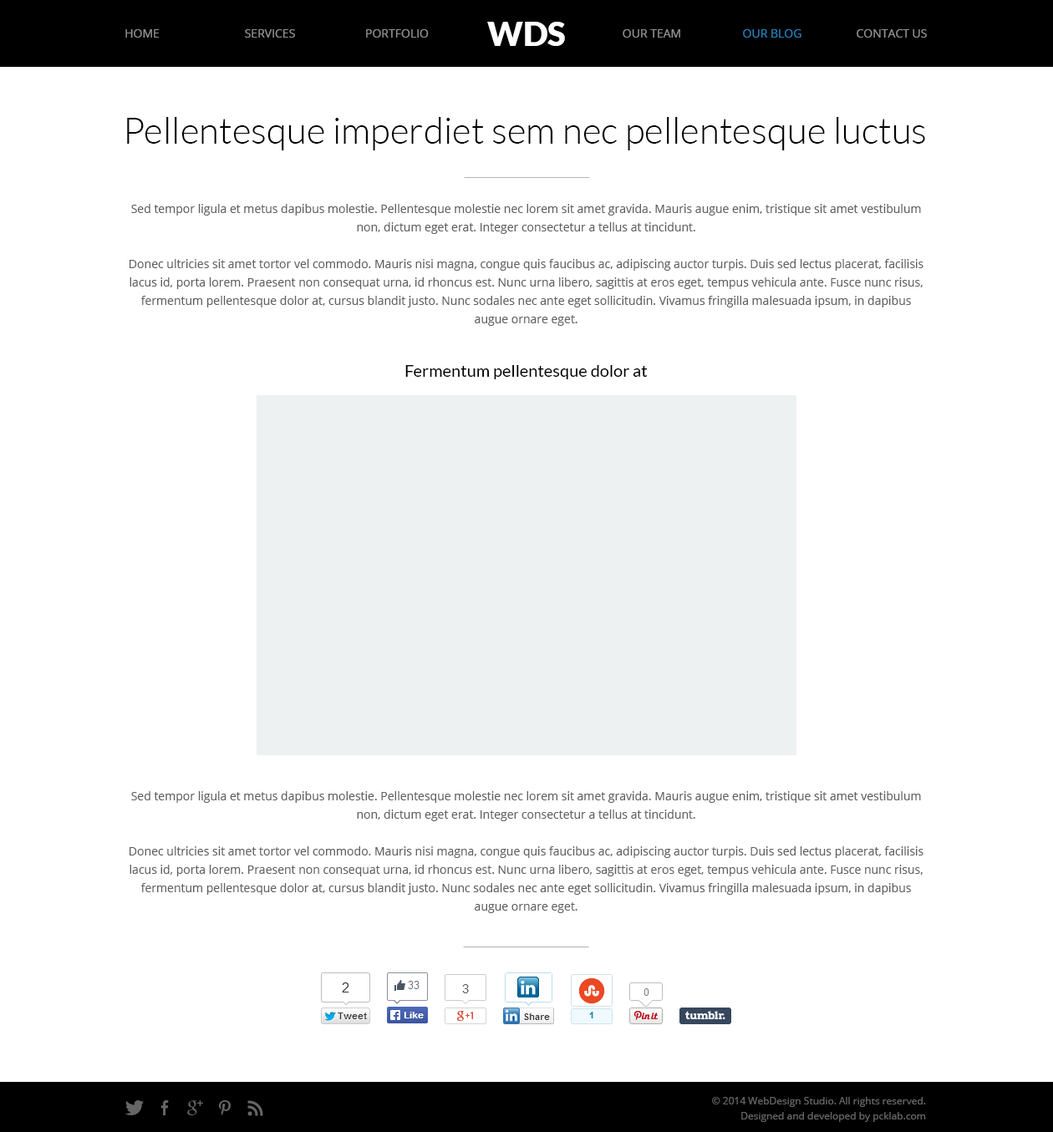
<style>
.page{position:relative;width:1053px;height:1132px;background:#ffffff}
.page>*{position:absolute;margin:0}
.t1{font:11.7px "OpenSans";color:#909090;text-transform:uppercase}
.t2{font:33.4px "Lato-Black";color:#ffffff;text-transform:uppercase}
.t3{font:11.7px "OpenSans";color:#2980b9;text-transform:uppercase}
.t4{font:36.8px "Lato-Light";color:#000000}
.t5{font:11.7px/18.4px "OpenSans";color:#606060}
.t6{font:16.7px "Lato-Regular";color:#000000}
.t7{font:10px/15px "OpenSans";color:#666666}
</style>
<div class="page">
<p class="t1" style="left:125px;top:29px;width:35px;height:9px">home</p>
<p class="t1" style="left:245px;top:29px;width:50px;height:9px">services</p>
<p class="t1" style="left:366px;top:29px;width:63px;height:9px">Portfolio</p>
<p class="t2" style="left:487px;top:22px;width:78px;height:24px">WDs</p>
<p class="t1" style="left:623px;top:29px;width:57px;height:9px">our team</p>
<p class="t3" style="left:743px;top:29px;width:58px;height:9px">our blog</p>
<p class="t1" style="left:857px;top:29px;width:70px;height:9px">Contact us</p>
<p class="t4" style="left:127px;top:117px;width:798px;height:33px">Pellentesque imperdiet sem nec pellentesque luctus</p>
<p class="t5" style="left:130px;top:204px;width:793px;height:122px;text-align:center">Sed tempor ligula et metus dapibus molestie. Pellentesque molestie nec lorem sit amet gravida. Mauris augue enim, tristique sit amet vestibulum non, dictum eget erat. Integer consectetur a tellus at tincidunt.<br><br>Donec ultricies sit amet tortor vel commodo. Mauris nisi magna, congue quis faucibus ac, adipiscing auctor turpis. Duis sed lectus placerat, facilisis lacus id, porta lorem. Praesent non consequat urna, id rhoncus est. Nunc urna libero, sagittis at eros eget, tempus vehicula ante. Fusce nunc risus, fermentum pellentesque dolor at, cursus blandit justo. Nunc sodales nec ante eget sollicitudin. Vivamus fringilla malesuada ipsum, in dapibus augue ornare eget.</p>
<p class="t6" style="left:405px;top:365px;width:243px;height:14px">Fermentum pellentesque dolor at</p>
<p class="t5" style="left:130px;top:791px;width:793px;height:122px;text-align:center">Sed tempor ligula et metus dapibus molestie. Pellentesque molestie nec lorem sit amet gravida. Mauris augue enim, tristique sit amet vestibulum non, dictum eget erat. Integer consectetur a tellus at tincidunt.<br><br>Donec ultricies sit amet tortor vel commodo. Mauris nisi magna, congue quis faucibus ac, adipiscing auctor turpis. Duis sed lectus placerat, facilisis lacus id, porta lorem. Praesent non consequat urna, id rhoncus est. Nunc urna libero, sagittis at eros eget, tempus vehicula ante. Fusce nunc risus, fermentum pellentesque dolor at, cursus blandit justo. Nunc sodales nec ante eget sollicitudin. Vivamus fringilla malesuada ipsum, in dapibus augue ornare eget.</p>
<p class="t7" style="left:712px;top:1097px;width:214px;height:25px;text-align:right">© 2014 WebDesign Studio. All rights reserved.<br>Designed and developed by pcklab.com</p>
</div>
